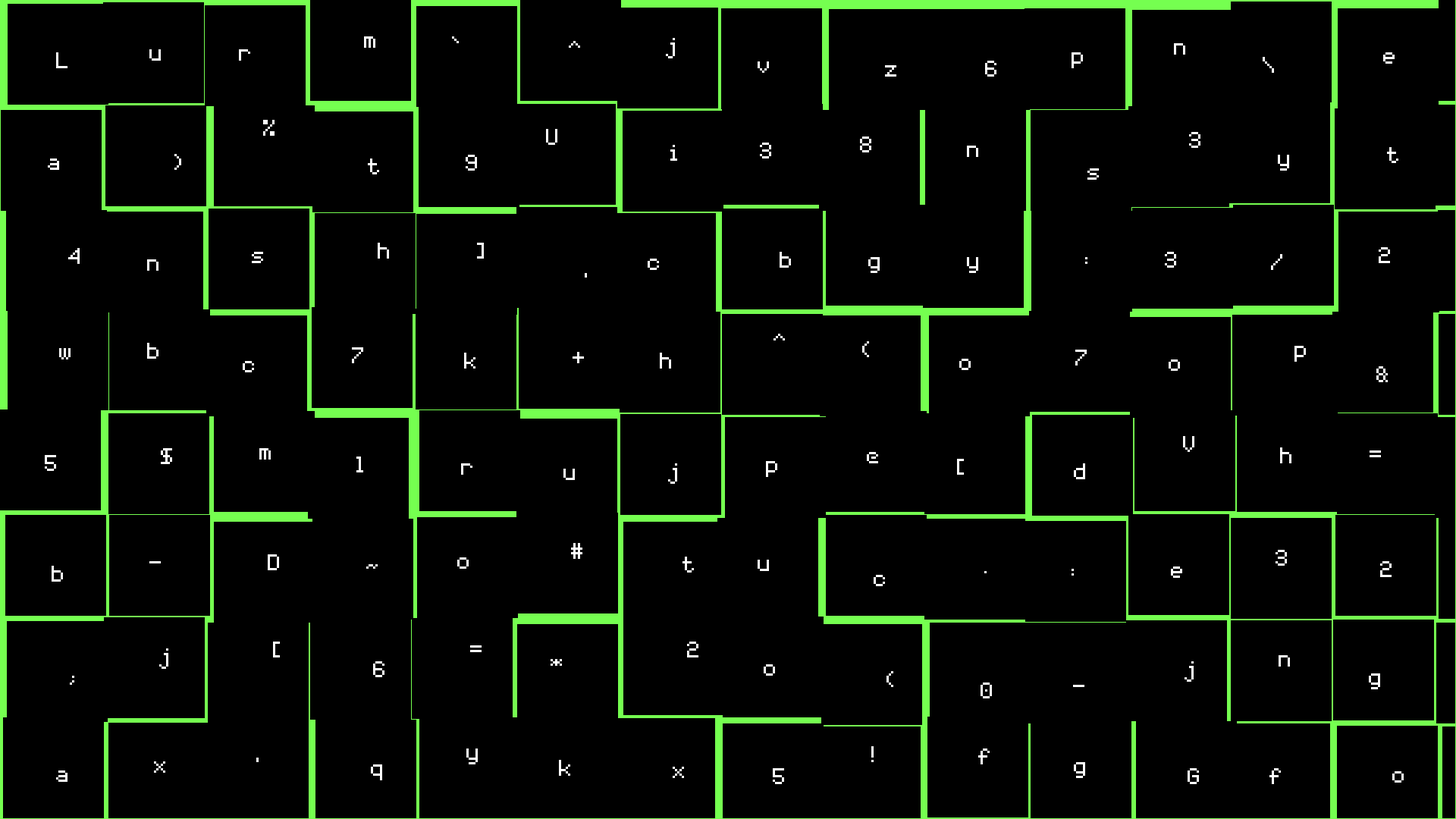
<style>
.page{position:relative;width:1456px;height:819px;background:#000000}
.page>*{position:absolute;margin:0}
.t1{font:36.4px "Coder's-Crux";color:#ffffff}
</style>
<div class="page">
<p class="t1" style="left:364px;top:36px;width:11px;height:12px">m</p>
<p class="t1" style="left:452px;top:36px;width:7px;height:7px">`</p>
<p class="t1" style="left:569px;top:41px;width:11px;height:7px">^</p>
<p class="t1" style="left:666px;top:38px;width:9px;height:20px">j</p>
<p class="t1" style="left:56px;top:52px;width:11px;height:16px">L</p>
<p class="t1" style="left:149px;top:49px;width:12px;height:12px">u</p>
<p class="t1" style="left:239px;top:49px;width:11px;height:12px">r</p>
<p class="t1" style="left:1072px;top:52px;width:11px;height:16px">p</p>
<p class="t1" style="left:1174px;top:43px;width:11px;height:12px">n</p>
<p class="t1" style="left:1383px;top:52px;width:12px;height:12px">e</p>
<p class="t1" style="left:758px;top:61px;width:11px;height:12px">v</p>
<p class="t1" style="left:885px;top:65px;width:11px;height:12px">z</p>
<p class="t1" style="left:985px;top:61px;width:11px;height:16px">6</p>
<p class="t1" style="left:1263px;top:57px;width:11px;height:16px">\</p>
<p class="t1" style="left:263px;top:120px;width:12px;height:16px">%</p>
<p class="t1" style="left:546px;top:129px;width:11px;height:16px">U</p>
<p class="t1" style="left:860px;top:136px;width:11px;height:16px">8</p>
<p class="t1" style="left:1189px;top:132px;width:11px;height:16px">3</p>
<p class="t1" style="left:670px;top:145px;width:7px;height:16px">i</p>
<p class="t1" style="left:760px;top:143px;width:11px;height:15px">3</p>
<p class="t1" style="left:967px;top:146px;width:11px;height:11px">n</p>
<p class="t1" style="left:1387px;top:147px;width:11px;height:16px">t</p>
<p class="t1" style="left:48px;top:158px;width:11px;height:12px">a</p>
<p class="t1" style="left:174px;top:154px;width:7px;height:16px">)</p>
<p class="t1" style="left:368px;top:158px;width:11px;height:16px">t</p>
<p class="t1" style="left:466px;top:155px;width:11px;height:16px">9</p>
<p class="t1" style="left:1278px;top:155px;width:11px;height:16px">y</p>
<p class="t1" style="left:1087px;top:168px;width:12px;height:12px">s</p>
<p class="t1" style="left:378px;top:243px;width:11px;height:16px">h</p>
<p class="t1" style="left:477px;top:243px;width:7px;height:16px">]</p>
<p class="t1" style="left:68px;top:248px;width:12px;height:16px">4</p>
<p class="t1" style="left:252px;top:252px;width:11px;height:11px">s</p>
<p class="t1" style="left:780px;top:252px;width:11px;height:16px">b</p>
<p class="t1" style="left:868px;top:257px;width:12px;height:16px">g</p>
<p class="t1" style="left:967px;top:257px;width:11px;height:16px">y</p>
<p class="t1" style="left:1085px;top:257px;width:2px;height:7px">:</p>
<p class="t1" style="left:1165px;top:252px;width:11px;height:16px">3</p>
<p class="t1" style="left:1271px;top:254px;width:11px;height:16px">/</p>
<p class="t1" style="left:1379px;top:247px;width:11px;height:16px">2</p>
<p class="t1" style="left:147px;top:259px;width:11px;height:12px">n</p>
<p class="t1" style="left:648px;top:259px;width:11px;height:11px">c</p>
<p class="t1" style="left:773px;top:334px;width:12px;height:6px">^</p>
<p class="t1" style="left:862px;top:341px;width:7px;height:16px">(</p>
<p class="t1" style="left:59px;top:348px;width:12px;height:11px">w</p>
<p class="t1" style="left:147px;top:343px;width:11px;height:16px">b</p>
<p class="t1" style="left:352px;top:347px;width:11px;height:16px">7</p>
<p class="t1" style="left:464px;top:353px;width:11px;height:16px">k</p>
<p class="t1" style="left:573px;top:352px;width:11px;height:11px">+</p>
<p class="t1" style="left:660px;top:353px;width:11px;height:16px">h</p>
<p class="t1" style="left:1075px;top:350px;width:12px;height:16px">7</p>
<p class="t1" style="left:1294px;top:346px;width:12px;height:16px">p</p>
<p class="t1" style="left:243px;top:361px;width:11px;height:11px">c</p>
<p class="t1" style="left:959px;top:359px;width:12px;height:11px">o</p>
<p class="t1" style="left:1169px;top:359px;width:11px;height:12px">o</p>
<p class="t1" style="left:1376px;top:366px;width:12px;height:16px">&amp;</p>
<p class="t1" style="left:1183px;top:436px;width:11px;height:16px">V</p>
<p class="t1" style="left:161px;top:448px;width:11px;height:16px">$</p>
<p class="t1" style="left:259px;top:448px;width:12px;height:12px">m</p>
<p class="t1" style="left:1280px;top:447px;width:11px;height:16px">h</p>
<p class="t1" style="left:45px;top:455px;width:11px;height:16px">5</p>
<p class="t1" style="left:356px;top:457px;width:7px;height:15px">l</p>
<p class="t1" style="left:766px;top:461px;width:11px;height:16px">p</p>
<p class="t1" style="left:867px;top:452px;width:11px;height:11px">@</p>
<p class="t1" style="left:957px;top:459px;width:7px;height:16px">[</p>
<p class="t1" style="left:1370px;top:450px;width:11px;height:7px">=</p>
<p class="t1" style="left:461px;top:463px;width:11px;height:12px">r</p>
<p class="t1" style="left:563px;top:469px;width:12px;height:11px">u</p>
<p class="t1" style="left:668px;top:463px;width:9px;height:21px">j</p>
<p class="t1" style="left:1074px;top:463px;width:11px;height:16px">d</p>
<p class="t1" style="left:571px;top:543px;width:11px;height:16px">#</p>
<p class="t1" style="left:268px;top:554px;width:11px;height:16px">D</p>
<p class="t1" style="left:457px;top:557px;width:12px;height:12px">o</p>
<p class="t1" style="left:682px;top:557px;width:12px;height:16px">t</p>
<p class="t1" style="left:1275px;top:550px;width:12px;height:16px">3</p>
<p class="t1" style="left:52px;top:566px;width:11px;height:16px">b</p>
<p class="t1" style="left:366px;top:564px;width:12px;height:5px">~</p>
<p class="t1" style="left:758px;top:560px;width:11px;height:11px">u</p>
<p class="t1" style="left:1072px;top:569px;width:2px;height:7px">:</p>
<p class="t1" style="left:1171px;top:566px;width:11px;height:12px">e</p>
<p class="t1" style="left:1380px;top:561px;width:12px;height:16px">2</p>
<p class="t1" style="left:874px;top:575px;width:11px;height:11px">c</p>
<p class="t1" style="left:273px;top:642px;width:7px;height:15px">[</p>
<p class="t1" style="left:687px;top:642px;width:11px;height:15px">2</p>
<p class="t1" style="left:159px;top:648px;width:9px;height:21px">j</p>
<p class="t1" style="left:470px;top:645px;width:12px;height:7px">=</p>
<p class="t1" style="left:373px;top:661px;width:11px;height:16px">6</p>
<p class="t1" style="left:551px;top:659px;width:11px;height:7px">*</p>
<p class="t1" style="left:764px;top:664px;width:11px;height:12px">o</p>
<p class="t1" style="left:1185px;top:661px;width:9px;height:21px">j</p>
<p class="t1" style="left:1279px;top:655px;width:11px;height:12px">n</p>
<p class="t1" style="left:70px;top:676px;width:4px;height:9px">;</p>
<p class="t1" style="left:886px;top:671px;width:7px;height:16px">(</p>
<p class="t1" style="left:1369px;top:673px;width:11px;height:16px">g</p>
<p class="t1" style="left:981px;top:682px;width:11px;height:16px">0</p>
<p class="t1" style="left:466px;top:748px;width:12px;height:16px">y</p>
<p class="t1" style="left:871px;top:746px;width:3px;height:16px">!</p>
<p class="t1" style="left:978px;top:748px;width:12px;height:16px">f</p>
<p class="t1" style="left:154px;top:761px;width:11px;height:12px">x</p>
<p class="t1" style="left:559px;top:760px;width:11px;height:16px">k</p>
<p class="t1" style="left:56px;top:770px;width:11px;height:12px">a</p>
<p class="t1" style="left:371px;top:764px;width:11px;height:16px">q</p>
<p class="t1" style="left:673px;top:767px;width:11px;height:11px">x</p>
<p class="t1" style="left:773px;top:768px;width:11px;height:16px">5</p>
<p class="t1" style="left:1074px;top:762px;width:11px;height:16px">g</p>
<p class="t1" style="left:1188px;top:768px;width:11px;height:16px">G</p>
<p class="t1" style="left:1269px;top:768px;width:12px;height:16px">f</p>
<p class="t1" style="left:1392px;top:771px;width:12px;height:12px">o</p>
</div>
